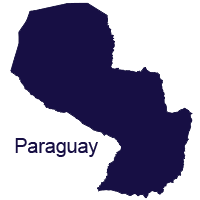
<style>
.page{position:relative;width:200px;height:200px;background:#ffffff}
.page>*{position:absolute;margin:0}
.t1{font:20.8px "ArialMT";color:#170f44;scale:0.94 1}
</style>
<div class="page">
<p class="t1" style="left:15px;top:138px;width:83px;height:19px">Paraguay</p>
</div>
